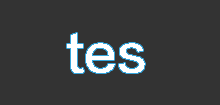
<style>
.page{position:relative;width:220px;height:105px;background:#333333}
.page>*{position:absolute;margin:0}
.t1{font:48.6px "FZLTZHJW--GB1-0";color:#ffffff}
</style>
<div class="page">
<p class="t1" style="left:67px;top:33px;width:78px;height:40px">tes</p>
</div>
